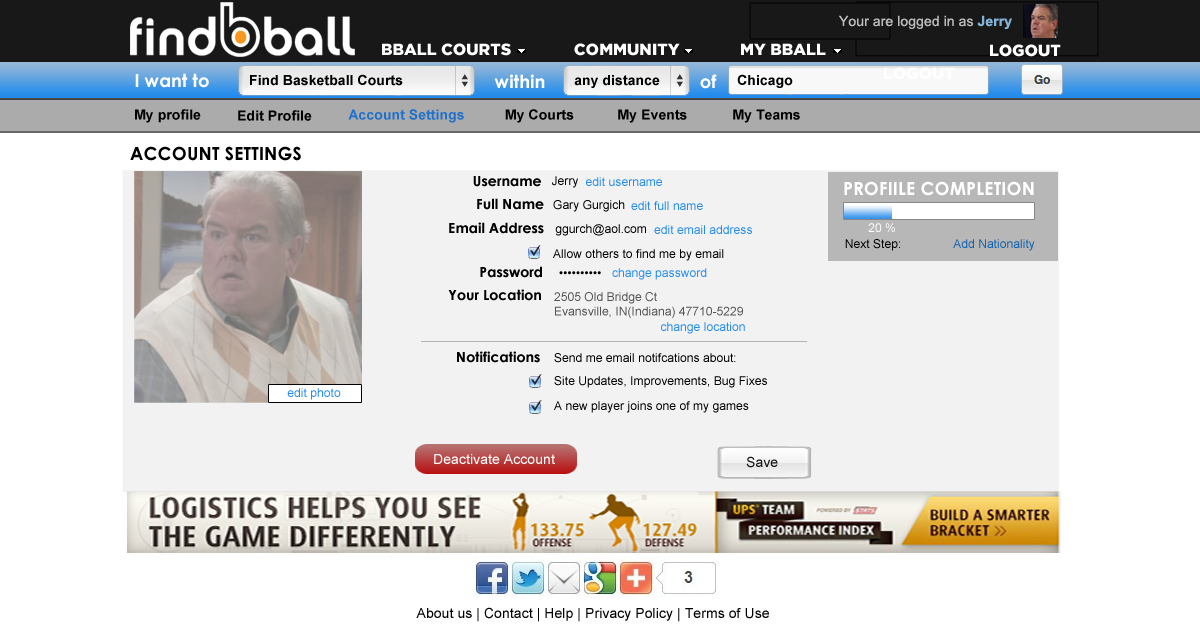
<style>
.page{position:relative;width:1200px;height:639px;background:#ffffff}
.page>*{position:absolute;margin:0}
.t1{font:16px "GothamBlack";letter-spacing:0.005em;color:#ffffff}
.t2{font:18px "CenturyGothic-Bold";letter-spacing:0.005em;color:#ffffff}
.t3{font:14px "Arial-BoldMT";letter-spacing:0.005em;color:#000000}
.t4{font:14px "Arial-BoldMT";letter-spacing:0.005em;color:#2271c9}
.t5{font:18px "CenturyGothic-Bold";letter-spacing:0.005em;color:#010101}
.t6{font:14px "CenturyGothic-Bold";letter-spacing:0.005em;color:#010101}
.t7{font:12px "ArialMT";letter-spacing:0.005em;color:#000000}
.t8{font:12px "ArialMT";letter-spacing:0.005em;color:#258cec}
.t9{font:12px "ArialMT";letter-spacing:0.005em;color:#ffffff}
.t10{font:12px "ArialMT";letter-spacing:0.005em;color:#1062ae}
.t11{font:12px "ArialMT";letter-spacing:0.005em;color:#535353}
.t12{font:12px/51px "ArialMT";letter-spacing:0.005em;color:#535353}
.t13{font:14px "ArialMT";letter-spacing:0.005em;color:#ffffff}
.t14{font:14px "ArialMT";letter-spacing:0.005em;color:#151414}
</style>
<div class="page">
<p class="t1" style="left:382px;top:43px;width:129px;height:13px">BBALL COURTS</p>
<p class="t1" style="left:574px;top:43px;width:106px;height:13px">COMMUNITY</p>
<p class="t1" style="left:741px;top:43px;width:85px;height:12px">MY BBALL</p>
<p class="t1" style="left:990px;top:44px;width:71px;height:13px">LOGOUT</p>
<p class="t2" style="left:135px;top:73px;width:74px;height:15px">I want to</p>
<p class="t3" style="left:250px;top:74px;width:153px;height:12px">Find Basketball Courts</p>
<p class="t2" style="left:494px;top:74px;width:51px;height:14px">within</p>
<p class="t3" style="left:574px;top:75px;width:86px;height:13px">any distance</p>
<p class="t2" style="left:700px;top:74px;width:17px;height:15px">of</p>
<p class="t3" style="left:737px;top:74px;width:56px;height:14px">Chicago</p>
<p class="t3" style="left:135px;top:109px;width:66px;height:14px">My profile</p>
<p class="t3" style="left:238px;top:110px;width:74px;height:11px">Edit Profile</p>
<p class="t4" style="left:348px;top:109px;width:116px;height:14px">Account Settings</p>
<p class="t3" style="left:505px;top:109px;width:69px;height:14px">My Courts</p>
<p class="t3" style="left:618px;top:109px;width:69px;height:14px">My Events</p>
<p class="t3" style="left:733px;top:109px;width:67px;height:14px">My Teams</p>
<p class="t5" style="left:130px;top:146px;width:171px;height:15px">ACCOUNT SETTINGS</p>
<p class="t6" style="left:473px;top:176px;width:68px;height:11px">Username</p>
<p class="t7" style="left:552px;top:176px;width:26px;height:12px">Jerry</p>
<p class="t8" style="left:586px;top:177px;width:76px;height:9px">edit username</p>
<p class="t2" style="left:844px;top:181px;width:190px;height:15px">PROFIILE COMPLETION</p>
<p class="t6" style="left:477px;top:198px;width:67px;height:12px">Full Name</p>
<p class="t7" style="left:553px;top:200px;width:72px;height:12px">Gary Gurgich</p>
<p class="t8" style="left:631px;top:201px;width:72px;height:9px">edit full name</p>
<p class="t6" style="left:449px;top:222px;width:95px;height:12px">Email Address</p>
<p class="t7" style="left:555px;top:224px;width:91px;height:12px">ggurch@aol.com</p>
<p class="t8" style="left:654px;top:225px;width:98px;height:9px">edit email address</p>
<p class="t9" style="left:868px;top:223px;width:27px;height:9px">20 %</p>
<p class="t7" style="left:845px;top:239px;width:55px;height:12px">Next Step:</p>
<p class="t10" style="left:953px;top:239px;width:82px;height:12px">Add Nationality</p>
<p class="t7" style="left:553px;top:249px;width:171px;height:12px">Allow others to find me by email</p>
<p class="t6" style="left:480px;top:266px;width:62px;height:12px">Password</p>
<p class="t8" style="left:612px;top:268px;width:95px;height:12px">change password</p>
<p class="t7" style="left:559px;top:271px;width:42px;height:4px">••••••••••</p>
<p class="t6" style="left:448px;top:289px;width:93px;height:12px">Your Location</p>
<p class="t11" style="left:554px;top:292px;width:189px;height:26px"><span class="t12">2505 Old Bridge Ct</span><br>Evansville, IN(Indiana) 47710-5229</p>
<p class="t8" style="left:661px;top:322px;width:84px;height:12px">change location</p>
<p class="t6" style="left:457px;top:351px;width:83px;height:12px">Notifications</p>
<p class="t7" style="left:554px;top:353px;width:182px;height:10px">Send me email notifcations about:</p>
<p class="t7" style="left:554px;top:376px;width:213px;height:12px">Site Updates, Improvements, Bug Fixes</p>
<p class="t8" style="left:287px;top:388px;width:54px;height:12px">edit photo</p>
<p class="t7" style="left:554px;top:401px;width:195px;height:12px">A new player joins one of my games</p>
<p class="t13" style="left:434px;top:454px;width:121px;height:10px">Deactivate Account</p>
<p class="t14" style="left:746px;top:456px;width:32px;height:12px">Save</p>
</div>
